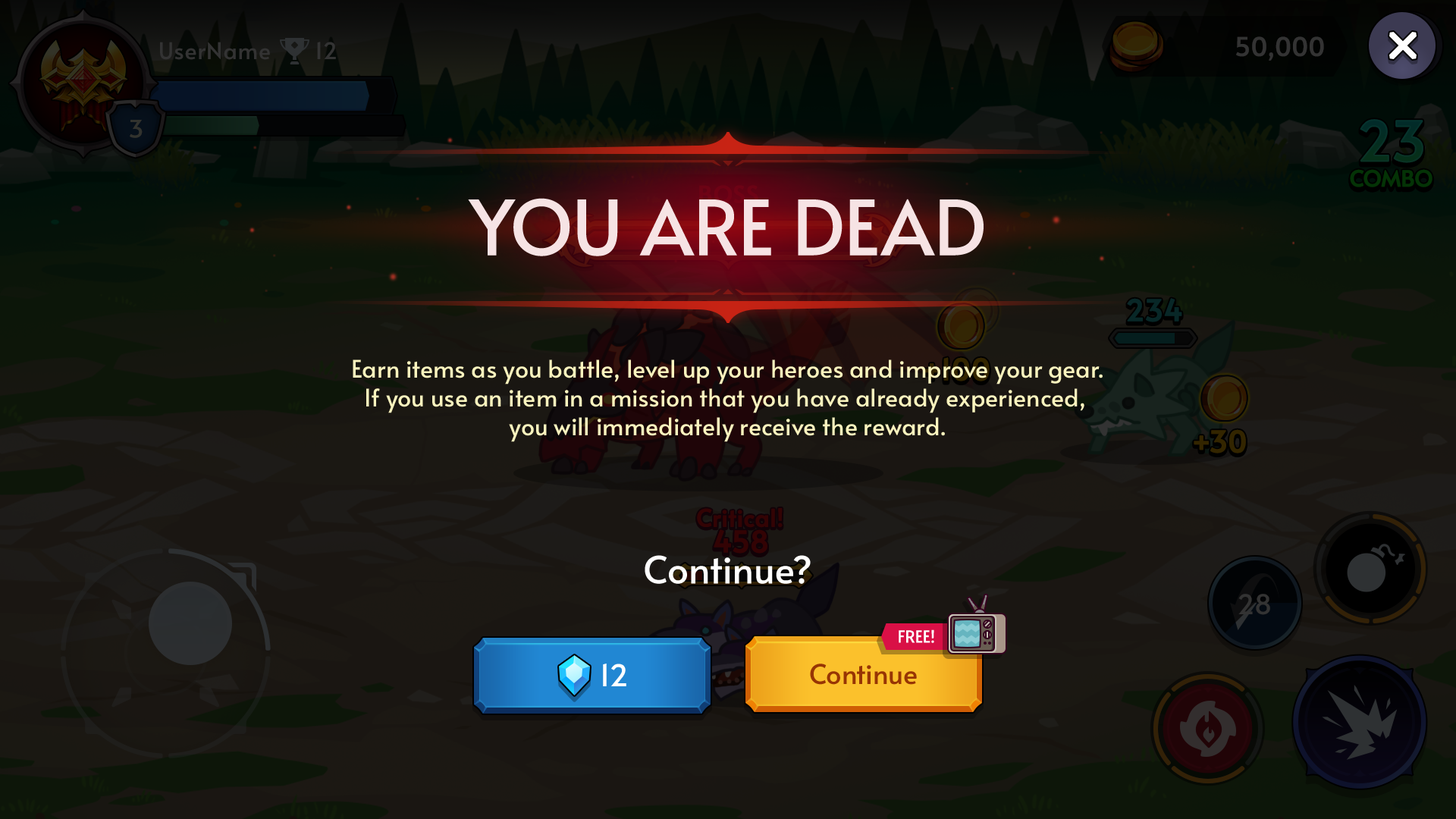
<style>
.page{position:relative;width:1456px;height:819px}
.page>*{position:absolute;margin:0}
.t1{font:75.8px "Alata-Regular";color:#f6e3e4;text-transform:uppercase}
.t2{font:24.3px "Alata-Regular";color:#fbf4be}
.t3{font:37.9px "Alata-Regular";color:#ffffff}
.t4{font:16.7px "Alata-Regular";color:#ffffff;text-transform:uppercase}
.t5{font:30.3px "Alata-Regular";color:#ffffff}
.t6{font:27.3px "Alata-Regular";color:#973504}
</style>
<div class="page">
<p class="t1" style="left:468px;top:198px;width:516px;height:58px">You are dead</p>
<p class="t2" style="left:353px;top:359px;width:750px;height:83px;text-align:center">Earn items as you battle, level up your heroes and improve your gear.<br>If you use an item in a mission that you have already experienced, <br>you will immediately receive the reward.</p>
<p class="t3" style="left:645px;top:555px;width:166px;height:29px">Continue?</p>
<p class="t4" style="left:899px;top:629px;width:35px;height:14px">Free!</p>
<p class="t5" style="left:603px;top:664px;width:23px;height:22px">12</p>
<p class="t6" style="left:810px;top:664px;width:107px;height:21px">Continue</p>
</div>
